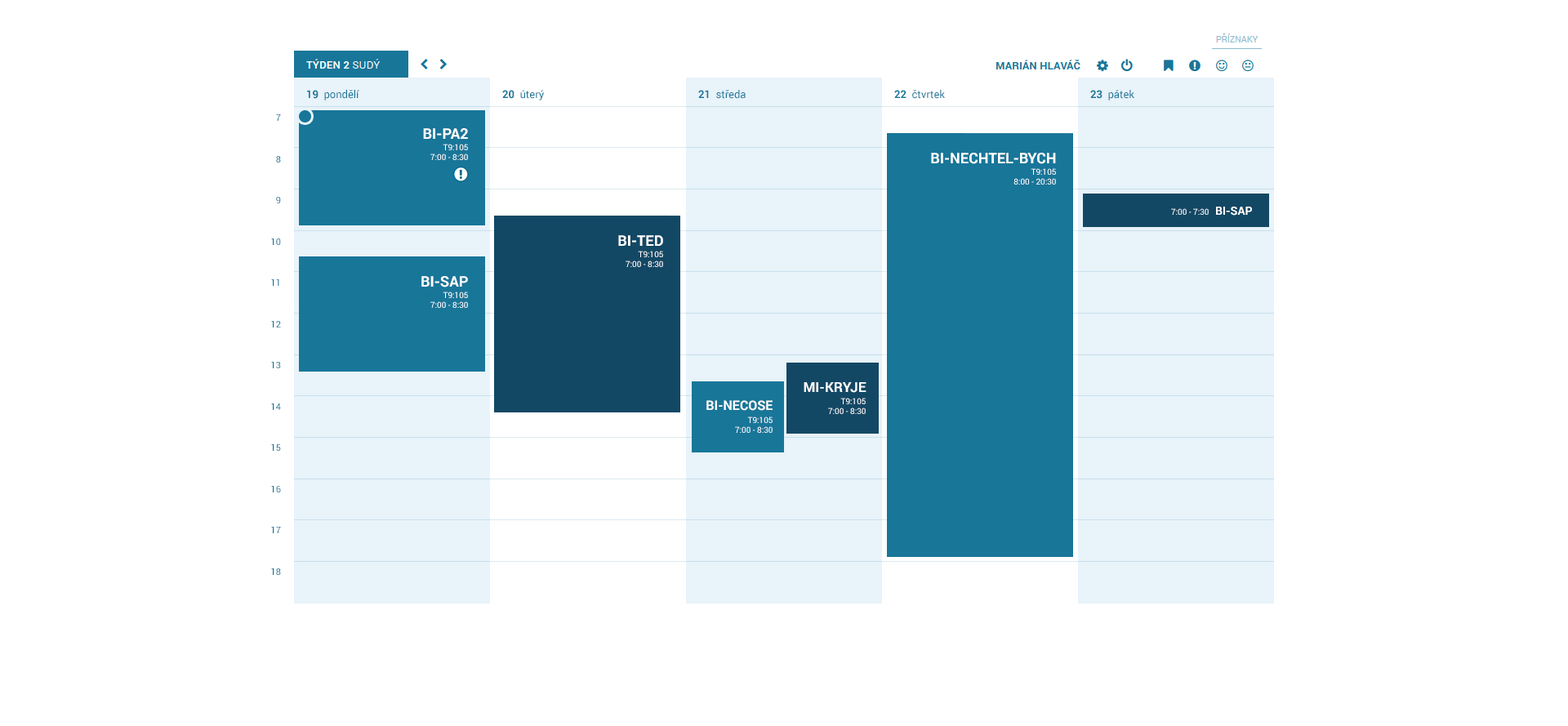
<style>
.page{position:relative;width:1568px;height:726px;background:#ffffff}
.page>*{position:absolute;margin:0}
.t1{font:10.6px "Roboto-Regular";color:#187699}
.t2{font:10.6px "Roboto-Bold";color:#187699}
.t3{font:9px/41.2px "Roboto-Regular";color:#187699}
.t4{font:14.7px "Roboto-Bold";color:#ffffff}
.t5{font:8.2px "Roboto-Regular";color:#ffffff}
.t6{font:11.4px "Roboto-Bold";color:#ffffff}
.t7{font:13.9px "Roboto-Bold";color:#ffffff}
.t8{font:13.1px "Roboto-Bold";color:#ffffff}
</style>
<div class="page">
<p class="t1" style="left:307px;top:90px;width:52px;height:10px"><span class="t2">19  </span>pondělí</p>
<p class="t1" style="left:502px;top:90px;width:42px;height:10px"><span class="t2">20  </span>úterý</p>
<p class="t1" style="left:698px;top:90px;width:48px;height:9px"><span class="t2">21  </span>středa</p>
<p class="t1" style="left:894px;top:90px;width:51px;height:9px"><span class="t2">22  </span>čtvrtek</p>
<p class="t1" style="left:1090px;top:90px;width:44px;height:10px"><span class="t2">23  </span>pátek</p>
<p class="t3" style="left:271px;top:114px;width:10px;height:461px;text-align:right">7<br>8<br>9<br>10<br>11<br>12<br>13<br>14<br>15<br>16<br>17<br>18<br>19<br>20</p>
<p class="t4" style="left:423px;top:128px;width:45px;height:11px">BI-PA2</p>
<p class="t5" style="left:430px;top:144px;width:38px;height:16px;text-align:right">T9:105<br>7:00 - 8:30</p>
<p class="t4" style="left:931px;top:153px;width:125px;height:11px">BI-NECHTEL-BYCH</p>
<p class="t5" style="left:1013px;top:168px;width:43px;height:17px;text-align:right">T9:105<br>8:00 - 20:30</p>
<p class="t5" style="left:1171px;top:208px;width:38px;height:7px">7:00 - 7:30</p>
<p class="t6" style="left:1216px;top:207px;width:36px;height:9px">BI-SAP</p>
<p class="t4" style="left:618px;top:235px;width:45px;height:11px">BI-TED</p>
<p class="t5" style="left:626px;top:251px;width:37px;height:16px;text-align:right">T9:105<br>7:00 - 8:30</p>
<p class="t4" style="left:421px;top:276px;width:47px;height:11px">BI-SAP</p>
<p class="t5" style="left:430px;top:292px;width:38px;height:16px;text-align:right">T9:105<br>7:00 - 8:30</p>
<p class="t7" style="left:804px;top:382px;width:62px;height:11px">MI-KRYJE</p>
<p class="t8" style="left:706px;top:400px;width:67px;height:11px">BI-NECOSE</p>
<p class="t5" style="left:828px;top:398px;width:38px;height:16px;text-align:right">T9:105<br>7:00 - 8:30</p>
<p class="t5" style="left:735px;top:416px;width:38px;height:17px;text-align:right">T9:105<br>7:00 - 8:30</p>
</div>
